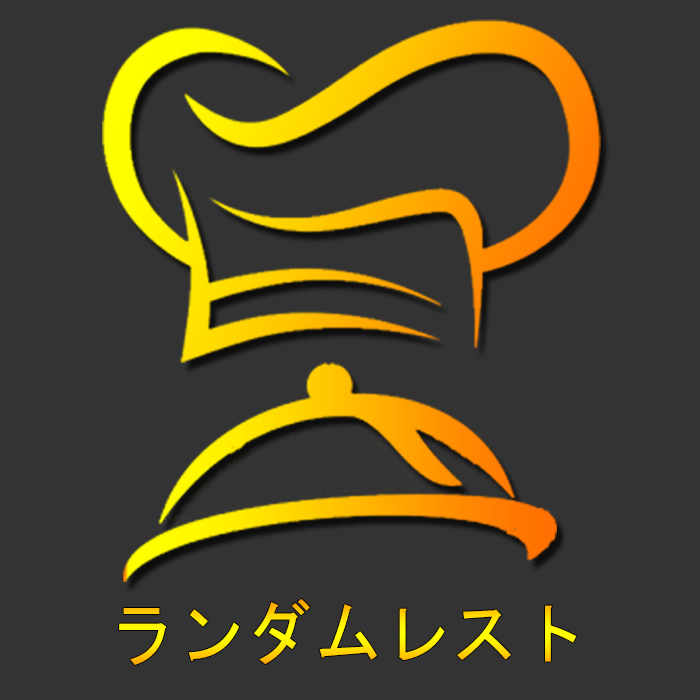
<style>
.page{position:relative;width:700px;height:700px;background:#333333}
.page>*{position:absolute;margin:0}
.t1{font:71.5px "MS-Gothic";letter-spacing:0.04em;scale:0.92 1}
</style>
<div class="page">
<p class="t1" style="left:119px;top:599px;width:458px;height:66px">ランダムレスト</p>
</div>
